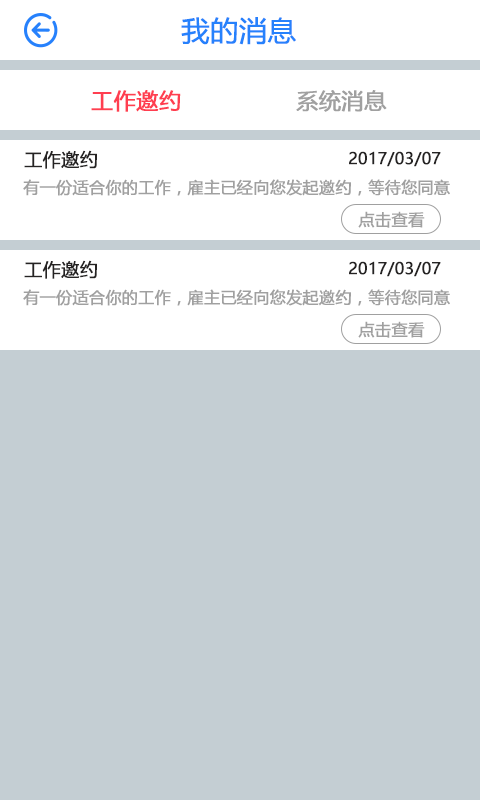
<style>
.page{position:relative;width:480px;height:800px;background:#c4ced3}
.page>*{position:absolute;margin:0}
.t1{font:28px "MicrosoftYaHei";color:#2681fc;font-weight:bold}
.t2{font:22px "MicrosoftYaHei";color:#ff3e50;font-weight:bold}
.t3{font:22px "MicrosoftYaHei";color:#a0a0a0;font-weight:bold}
.t4{font:18px "MicrosoftYaHei";color:#252323;font-weight:bold}
.t5{font:16px "MicrosoftYaHei";color:#252323;font-weight:bold}
.t6{font:16px "MicrosoftYaHei";color:#a0a0a0;font-weight:bold}
</style>
<div class="page">
<p class="t1" style="left:181px;top:17px;width:115px;height:28px">我的消息</p>
<p class="t2" style="left:91px;top:90px;width:90px;height:22px">工作邀约</p>
<p class="t3" style="left:296px;top:90px;width:91px;height:22px">系统消息</p>
<p class="t4" style="left:24px;top:150px;width:73px;height:19px">工作邀约</p>
<p class="t5" style="left:349px;top:151px;width:92px;height:16px">2017/03/07</p>
<p class="t6" style="left:23px;top:179px;width:427px;height:17px">有一份适合你的工作，雇主已经向您发起邀约，等待您同意</p>
<p class="t6" style="left:358px;top:211px;width:67px;height:17px">点击查看</p>
<p class="t4" style="left:24px;top:260px;width:73px;height:19px">工作邀约</p>
<p class="t5" style="left:349px;top:261px;width:92px;height:16px">2017/03/07</p>
<p class="t6" style="left:23px;top:289px;width:427px;height:17px">有一份适合你的工作，雇主已经向您发起邀约，等待您同意</p>
<p class="t6" style="left:358px;top:321px;width:67px;height:17px">点击查看</p>
</div>
